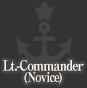
<style>
.page{position:relative;width:87px;height:88px;background:#333333}
.page>*{position:absolute;margin:0}
.t1{font:14px/12px "RyuminPro-ExBold";letter-spacing:-0.08em;color:#fff6f2;scale:0.9 1}
.t2{font:13px/12px "RyuminPro-ExBold";letter-spacing:-0.08em;color:#fff6f2;scale:0.9 1}
</style>
<div class="page">
<p class="t1" style="left:3px;top:60px;width:81px;height:24px;text-align:center">Lt.-Commander<br><span class="t2">(Novice)</span></p>
</div>
